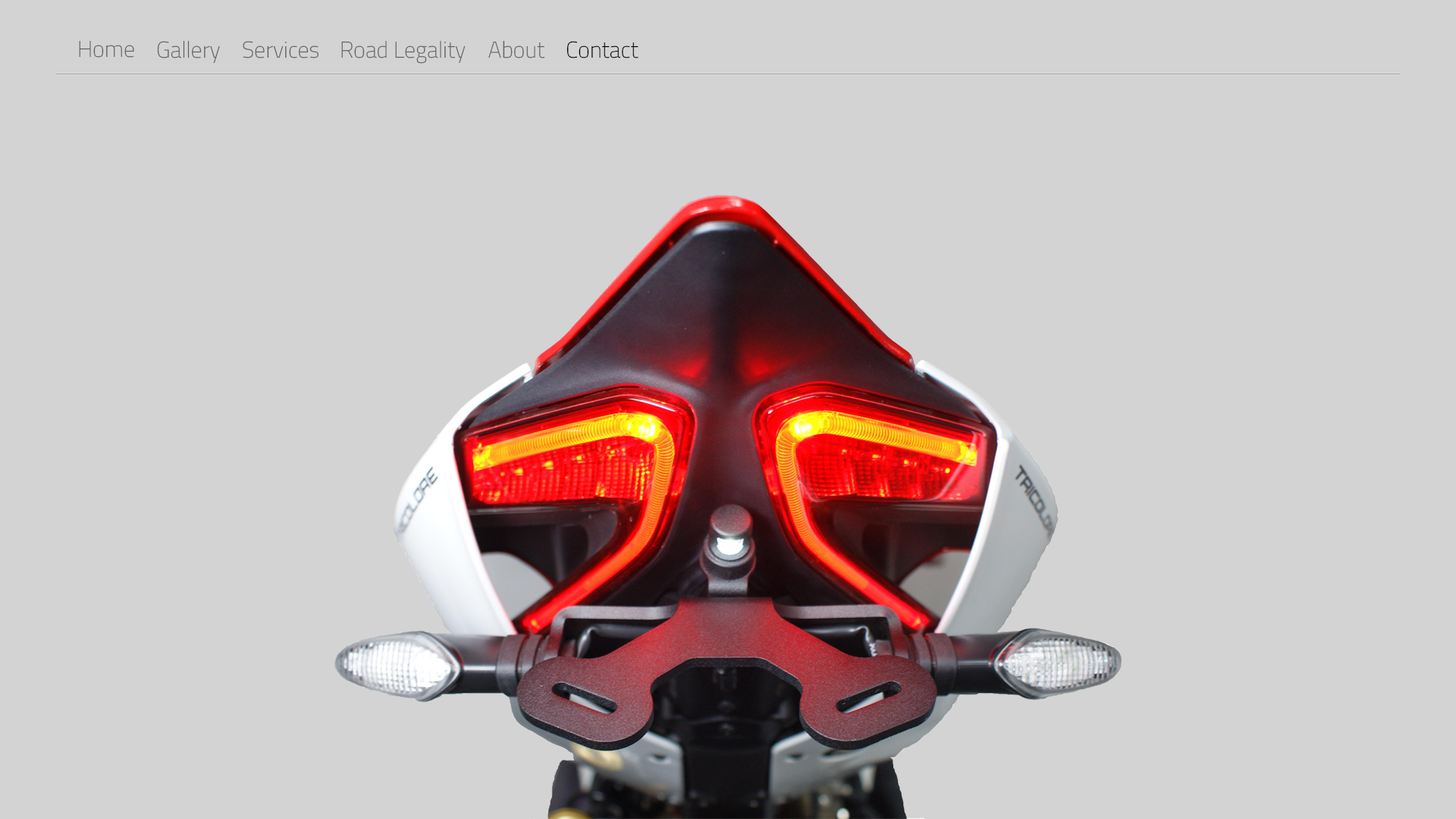
<style>
.page{position:relative;width:1456px;height:819px;background:#d3d3d3}
.page>*{position:absolute;margin:0}
.t1{font:22.7px "TitilliumWeb-Thin";color:#616161}
.t2{font:22.7px "TitilliumWeb-Thin";color:#000000}
</style>
<div class="page">
<p class="t1" style="left:79px;top:40px;width:55px;height:18px">Home</p>
<p class="t1" style="left:157px;top:40px;width:63px;height:24px">Gallery</p>
<p class="t1" style="left:243px;top:41px;width:75px;height:17px">Services</p>
<p class="t1" style="left:341px;top:40px;width:125px;height:24px">Road Legality</p>
<p class="t1" style="left:488px;top:40px;width:57px;height:18px">About</p>
<p class="t2" style="left:566px;top:41px;width:73px;height:17px">Contact</p>
</div>
